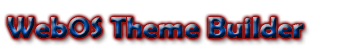
<style>
.page{position:relative;width:342px;height:54px;background:#ffffff}
.page>*{position:absolute;margin:0}
.t1{font:30px "BerlinSansFBDemi-Bold"}
</style>
<div class="page">
<p class="t1" style="left:7px;top:17px;width:297px;height:21px">WebOS Theme Builder</p>
</div>
